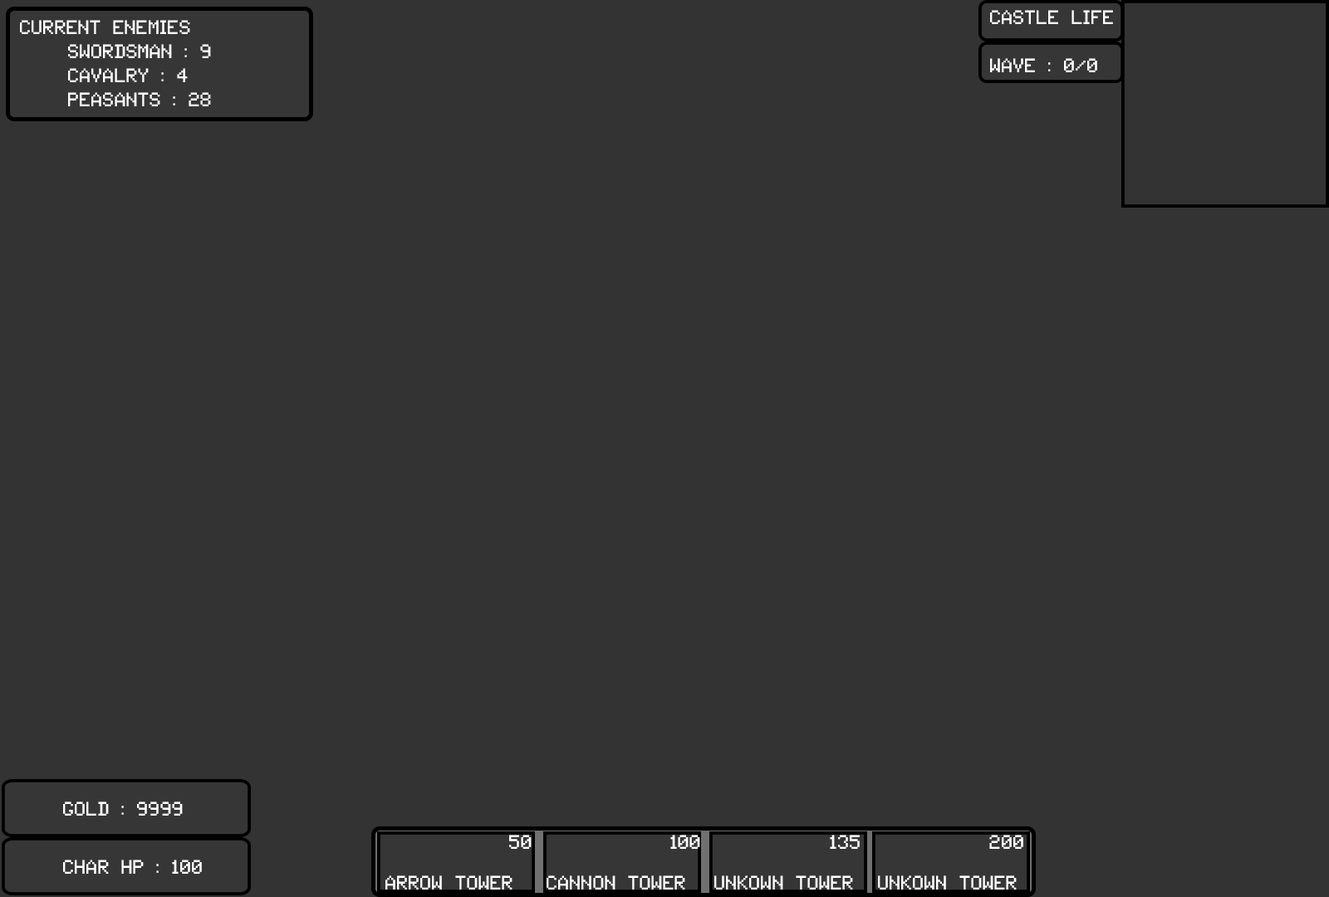
<style>
.page{position:relative;width:1329px;height:897px;background:#333333}
.page>*{position:absolute;margin:0}
.t1{font:19.9px "Tandysoft";color:#fffefe}
</style>
<div class="page">
<p class="t1" style="left:990px;top:10px;width:123px;height:62px">Castle life<br><br>Wave : 0/0</p>
<p class="t1" style="left:20px;top:20px;width:191px;height:86px">Current enemies<br>   Swordsman : 9<br>   Cavalry : 4<br>   peasants : 28</p>
<p class="t1" style="left:63px;top:802px;width:120px;height:14px">Gold : 9999</p>
<p class="t1" style="left:509px;top:835px;width:514px;height:14px">50           100           135           200</p>
<p class="t1" style="left:63px;top:860px;width:139px;height:14px">Char HP : 100</p>
<p class="t1" style="left:385px;top:876px;width:632px;height:14px">ARROW Tower  Cannon tower  unkown tower  unkown tower</p>
</div>
